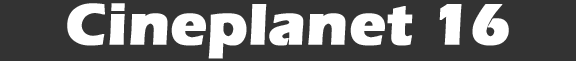
<style>
.page{position:relative;width:576px;height:61px;background:#333333}
.page>*{position:absolute;margin:0}
.t1{font:60px "ErasITC-Bold";color:#ffffff;font-weight:bold}
</style>
<div class="page">
<p class="t1" style="left:67px;top:3px;width:442px;height:56px">Cineplanet 16</p>
</div>
